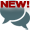
<style>
.page{position:relative;width:30px;height:30px}
.page>*{position:absolute;margin:0}
.t1{font:9px "HelveticaCYBold";letter-spacing:-0.05em;color:#990000;text-transform:uppercase;font-weight:bold;scale:1.55 1}
</style>
<div class="page">
<p class="t1" style="left:0px;top:1px;width:30px;height:7px">New!</p>
</div>
